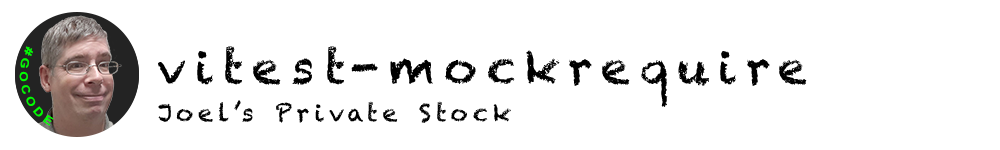
<style>
.page{position:relative;width:1000px;height:150px;background:#ffffff}
.page>*{position:absolute;margin:0}
.t1{font:11.2px "Arial-BoldMT";letter-spacing:0.2em;color:#00ff00}
.t2{font:46px "Chalkduster";letter-spacing:0.2em;color:#000000}
.t3{font:24px "Chalkduster";letter-spacing:0.2em;color:#000000}
</style>
<div class="page">
<p class="t1" style="left:19px;top:46px;width:35px;height:80px;rotate:72deg">#GOCODE</p>
<p class="t2" style="left:158px;top:46px;width:649px;height:61px">vitest-mockrequire</p>
<p class="t3" style="left:158px;top:100px;width:353px;height:23px">Joel’s Private Stock</p>
</div>
